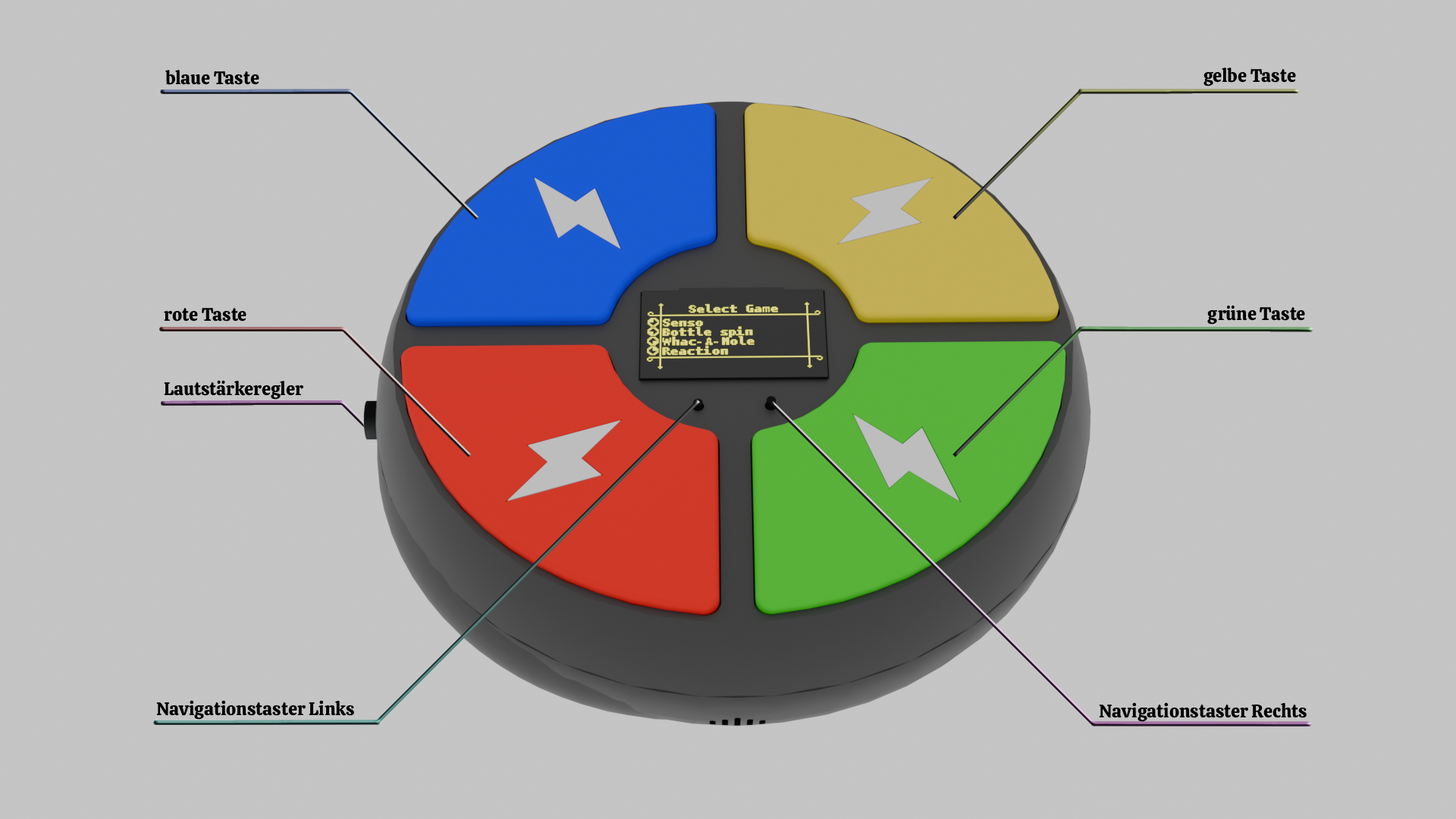
<style>
.page{position:relative;width:1456px;height:819px;background:#c5c5c5}
.page>*{position:absolute;margin:0}
.t1{font:18.2px "Calistoga-Regular";color:#000000}
</style>
<div class="page">
<p class="t1" style="left:165px;top:70px;width:94px;height:15px">blaue Taste</p>
<p class="t1" style="left:1203px;top:67px;width:93px;height:19px">gelbe Taste</p>
<p class="t1" style="left:1207px;top:305px;width:98px;height:20px">grüne Taste</p>
<p class="t1" style="left:164px;top:307px;width:82px;height:15px">rote Taste</p>
<p class="t1" style="left:164px;top:380px;width:139px;height:20px">Lautstärkeregler</p>
<p class="t1" style="left:156px;top:700px;width:198px;height:20px">Navigationstaster Links</p>
<p class="t1" style="left:1099px;top:702px;width:208px;height:20px">Navigationstaster Rechts</p>
</div>
